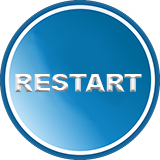
<style>
.page{position:relative;width:160px;height:160px;background:#ffffff}
.page>*{position:absolute;margin:0}
.t1{font:25px "Arial-Black"}
</style>
<div class="page">
<p class="t1" style="left:15px;top:74px;width:127px;height:18px">RESTART</p>
</div>
